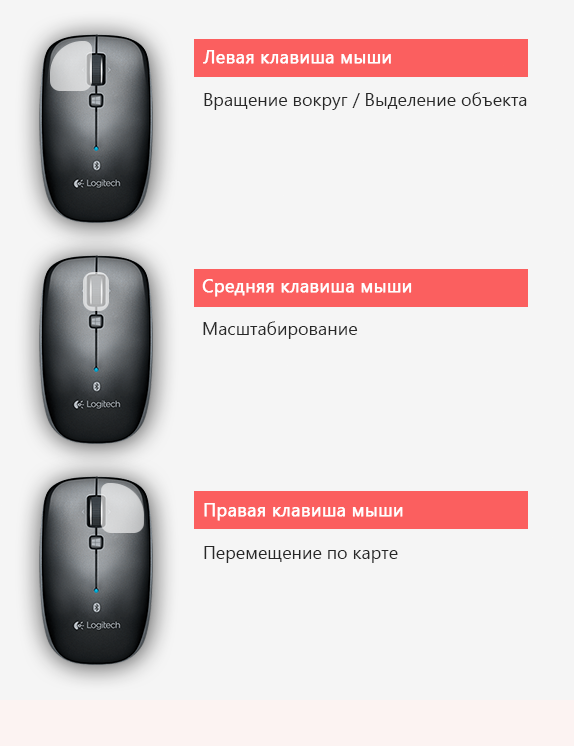
<style>
.page{position:relative;width:574px;height:746px;background:#f5f5f5}
.page>*{position:absolute;margin:0}
.t1{font:18px "YuGothicUI-Regular";color:#282828}
.t2{font:18px "YuGothicUI-Regular";color:#ffffff;font-weight:bold}
</style>
<div class="page">
<p class="t1" style="left:203px;top:50px;width:324px;height:60px"><span class="t2">Левая клавиша мыши<br></span><br>Вращение вокруг / Выделение объекта</p>
<p class="t2" style="left:202px;top:279px;width:210px;height:60px">Средняя клавиша мыши<br><span class="t1"><br>Масштабирование</span></p>
<p class="t1" style="left:204px;top:503px;width:199px;height:60px"><span class="t2">Правая клавиша мыши<br></span><br>Перемещение по карте</p>
</div>
